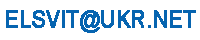
<style>
.page{position:relative;width:200px;height:40px;background:#ffffff}
.page>*{position:absolute;margin:0}
.t1{font:24px "ArialMT";color:#0664b0;font-weight:bold;scale:0.86 1}
</style>
<div class="page">
<p class="t1" style="left:6px;top:10px;width:190px;height:23px">ELSVIT@UKR.NET</p>
</div>
